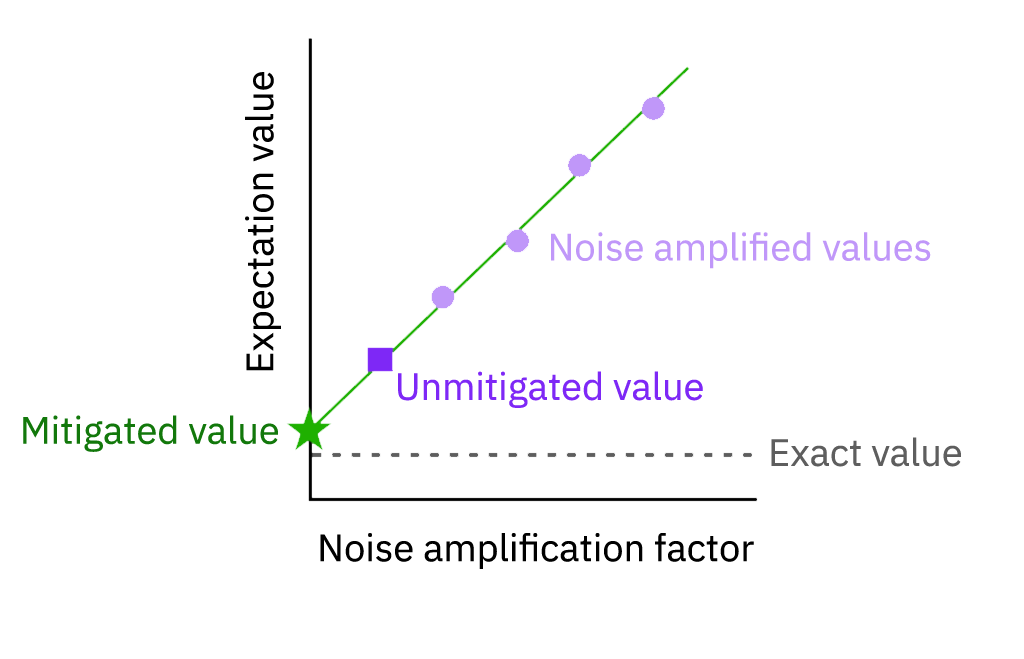
<style>
.page{position:relative;width:1024px;height:659px;background:#ffffff}
.page>*{position:absolute;margin:0}
.t1{font:38px "IBMPlexSans-Regular";color:#000000}
.t2{font:38px "IBMPlexSans-Regular";color:#c097f9}
.t3{font:38px "IBMPlexSans-Regular";color:#7e28f6}
.t4{font:38px "IBMPlexSans-Regular";color:#12780b}
.t5{font:38px "IBMPlexSans-Regular";color:#5e5e5e}
</style>
<div class="page">
<p class="t1" style="left:245px;top:72px;width:36px;height:299px;rotate:-90deg">Expectation value</p>
<p class="t2" style="left:551px;top:232px;width:380px;height:37px">Noise amplified values</p>
<p class="t3" style="left:398px;top:371px;width:305px;height:37px">Unmitigated value</p>
<p class="t4" style="left:23px;top:415px;width:255px;height:37px">Mitigated value</p>
<p class="t5" style="left:771px;top:437px;width:190px;height:30px">Exact value</p>
<p class="t1" style="left:320px;top:533px;width:434px;height:36px">Noise amplification factor</p>
</div>
